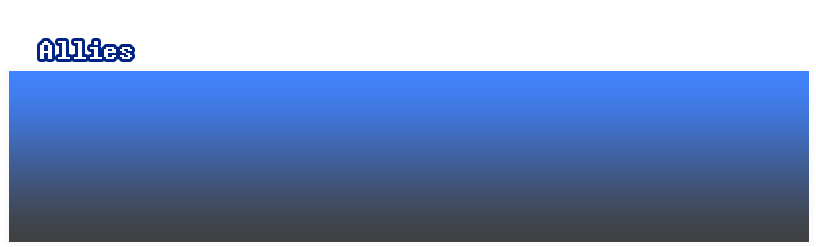
<style>
.page{position:relative;width:816px;height:247px;background:#ffffff}
.page>*{position:absolute;margin:0}
.t1{font:24px "Terminal";color:#ffffff}
</style>
<div class="page">
<p class="t1" style="left:40px;top:41px;width:92px;height:18px">Allies</p>
</div>
